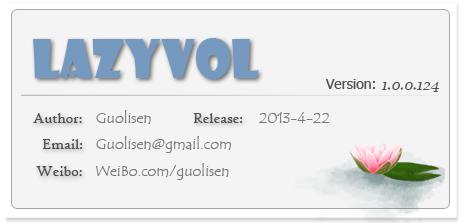
<style>
.page{position:relative;width:460px;height:223px;background:#f4f4f4}
.page>*{position:absolute;margin:0}
.t1{font:52px "ShowcardGothic-Reg";color:#7699c0}
.t2{font:14px "Tahoma";color:#504f4f}
.t3{font:15.8px "LucidaCalligraphy-Italic";color:#504f4f;scale:0.85 1}
.t4{font:15px "HighTowerText-Reg";color:#504f4f}
.t5{font:15px "TempusSansITC";color:#797878}
</style>
<div class="page">
<p class="t1" style="left:33px;top:38px;width:226px;height:41px">LazyVol</p>
<p class="t2" style="left:325px;top:79px;width:50px;height:10px">Version:</p>
<p class="t3" style="left:382px;top:82px;width:57px;height:10px">1.0.0.124</p>
<p class="t4" style="left:33px;top:113px;width:49px;height:10px">Author:</p>
<p class="t5" style="left:96px;top:110px;width:55px;height:14px">Guolisen</p>
<p class="t4" style="left:193px;top:113px;width:50px;height:10px">Release:</p>
<p class="t5" style="left:259px;top:112px;width:71px;height:11px">2013-4-22</p>
<p class="t5" style="left:96px;top:136px;width:135px;height:17px">Guolisen@gmail.com</p>
<p class="t4" style="left:43px;top:139px;width:40px;height:10px">Email:</p>
<p class="t4" style="left:36px;top:166px;width:46px;height:10px">Weibo:</p>
<p class="t5" style="left:95px;top:163px;width:134px;height:17px">WeiBo.com/guolisen</p>
</div>
